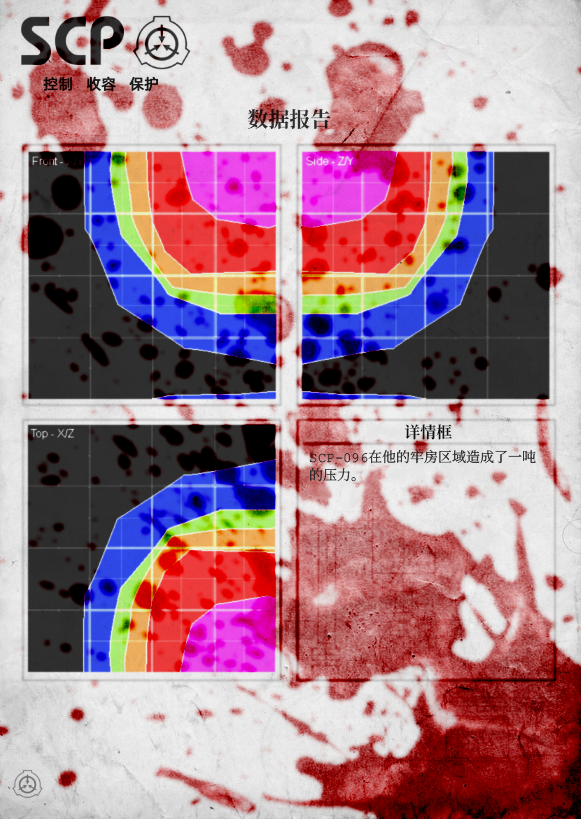
<style>
.page{position:relative;width:581px;height:819px}
.page>*{position:absolute;margin:0}
.t1{font:15px "AlibabaPuHuiTiR";color:#181111;font-weight:bold}
.t2{font:21px "ContainmentBreach-Bold";color:#2d2b2b}
.t3{font:16px "ContainmentBreach-Bold";color:#121212}
.t4{font:14px/18px "ContainmentBreach-Regular";color:#252525}
</style>
<div class="page">
<p class="t1" style="left:43px;top:76px;width:115px;height:15px">控制   收容   保护</p>
<p class="t2" style="left:248px;top:109px;width:83px;height:20px">数据报告</p>
<p class="t3" style="left:404px;top:424px;width:48px;height:16px">详情框</p>
<p class="t4" style="left:310px;top:450px;width:226px;height:32px;opacity:0.95">SCP-096在他的牢房区域造成了一吨<br>的压力。</p>
</div>
